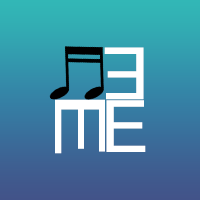
<style>
.page{position:relative;width:200px;height:200px}
.page>*{position:absolute;margin:0}
.t1{font:72px "ArialMT";color:#ffffff}
.t2{font:69.5px "ArialMT";color:#ffffff;scale:1.43 1}
</style>
<div class="page">
<p class="t1" style="left:104px;top:47px;width:40px;height:53px;rotate:180deg">E</p>
<p class="t2" style="left:55px;top:99px;width:50px;height:55px;rotate:90deg">E</p>
<p class="t1" style="left:106px;top:100px;width:40px;height:52px">E</p>
</div>
